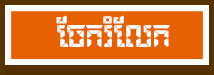
<style>
.page{position:relative;width:214px;height:75px;background:#e86101}
.page>*{position:absolute;margin:0}
.t1{font:30px "Kh-Digital-Thom";color:#ffffff}
</style>
<div class="page">
<p class="t1" style="left:56px;top:15px;width:114px;height:32px">ចែករំលែក</p>
</div>
